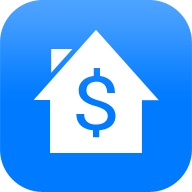
<style>
.page{position:relative;width:192px;height:192px;background:#007aff}
.page>*{position:absolute;margin:0}
.t1{font:74.8px "Roboto-Regular";color:#007aff;scale:1.15 1}
</style>
<div class="page">
<p class="t1" style="left:76px;top:68px;width:40px;height:70px">$</p>
</div>
